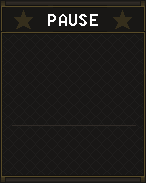
<style>
.page{position:relative;width:146px;height:183px;background:#181716}
.page>*{position:absolute;margin:0}
.t1{font:30px "Terminal";letter-spacing:0.01em;color:#ffffff}
</style>
<div class="page">
<p class="t1" style="left:48px;top:14px;width:50px;height:12px">PAUSE</p>
</div>
